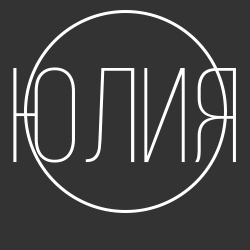
<style>
.page{position:relative;width:250px;height:250px;background:#333333}
.page>*{position:absolute;margin:0}
.t1{font:135px "BebasNeueLight";color:#ffffff}
.t2{font:60px "BebasNeueLight";color:#ffffff}
</style>
<div class="page">
<p class="t1" style="left:13px;top:67px;width:223px;height:96px"><span class="t2"><br><br><br><br></span>Юлия</p>
</div>
